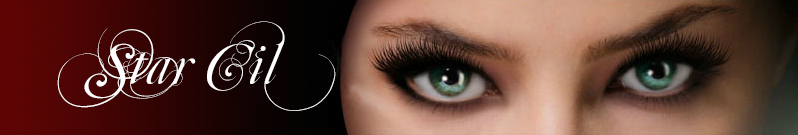
<style>
.page{position:relative;width:798px;height:135px}
.page>*{position:absolute;margin:0}
.t1{font:60px "MutluOrnamental";color:#ffffff}
</style>
<div class="page">
<p class="t1" style="left:57px;top:21px;width:279px;height:90px">Star Cil</p>
</div>
